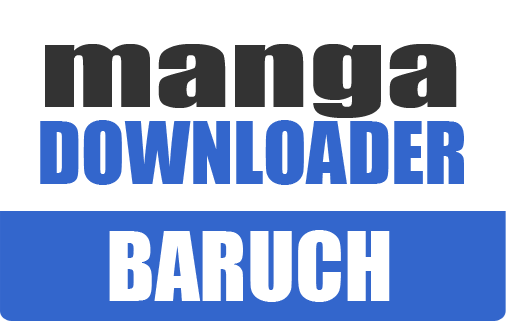
<style>
.page{position:relative;width:506px;height:321px;background:#ffffff}
.page>*{position:absolute;margin:0}
.t1{font:96px "Impact";color:#333333;scale:1.56 1}
.t2{font:80px "Impact";color:#3366cc}
.t3{font:88px "Impact";color:#ffffff}
</style>
<div class="page">
<p class="t1" style="left:45px;top:44px;width:412px;height:74px">manga</p>
<p class="t2" style="left:40px;top:120px;width:424px;height:65px">DOWNLOADER</p>
<p class="t3" style="left:109px;top:230px;width:281px;height:72px">BARUCH</p>
</div>
